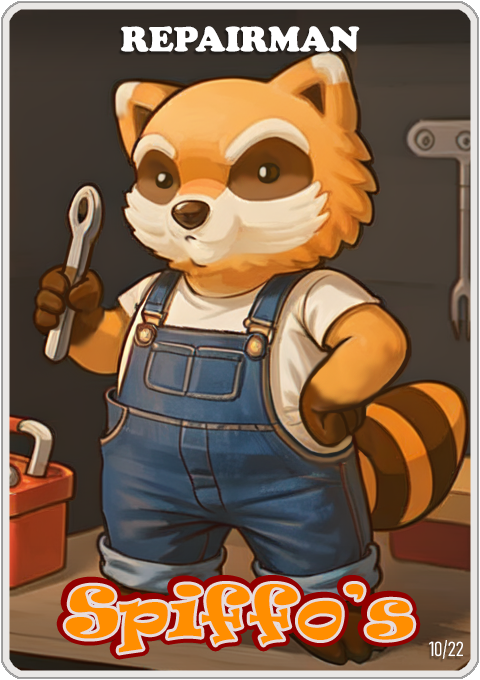
<style>
.page{position:relative;width:480px;height:680px}
.page>*{position:absolute;margin:0}
.t1{font:36px "CooperBlack";color:#ffffff}
.t2{font:65px "Ravie";color:#ff8e00}
.t3{font:20px "Bahnschrift-LightCondensed";color:#ffffff}
</style>
<div class="page">
<p class="t1" style="left:121px;top:26px;width:239px;height:26px">REPAIRMAN</p>
<p class="t2" style="left:65px;top:584px;width:349px;height:69px">Spiffo’s</p>
<p class="t3" style="left:429px;top:640px;width:34px;height:19px">10/22</p>
</div>
